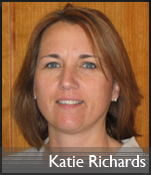
<style>
.page{position:relative;width:151px;height:175px}
.page>*{position:absolute;margin:0}
.t1{font:16.7px "GillSansMT";color:#fffefe}
</style>
<div class="page">
<p class="t1" style="left:49px;top:155px;width:97px;height:12px">Katie Richards</p>
</div>
